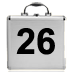
<style>
.page{position:relative;width:70px;height:72px;background:#ffffff}
.page>*{position:absolute;margin:0}
.t1{font:36px "Arial-BoldMT";color:#000000}
</style>
<div class="page">
<p class="t1" style="left:16px;top:28px;width:39px;height:27px">26</p>
</div>
